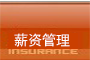
<style>
.page{position:relative;width:90px;height:60px}
.page>*{position:absolute;margin:0}
.t1{font:14px "SimHei";color:#ffffff}
</style>
<div class="page">
<p class="t1" style="left:14px;top:33px;width:56px;height:14px">薪资管理</p>
</div>
